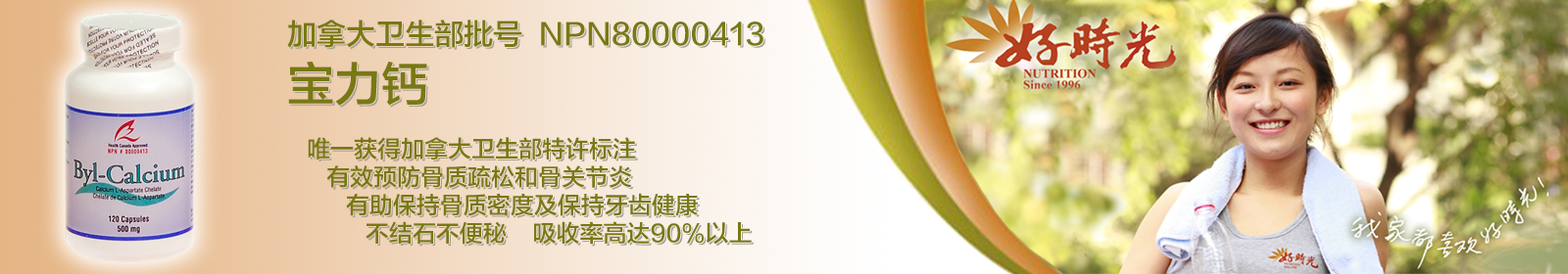
<style>
.page{position:relative;width:1568px;height:274px}
.page>*{position:absolute;margin:0}
.t1{font:23.5px "FZLTZHK--GBK1-0";color:#787913}
.t2{font:29.4px "FZLTZHK--GBK1-0";color:#787913}
.t3{font:47px "FZLTZHK--GBK1-0";color:#787913}
</style>
<div class="page">
<p class="t1" style="left:287px;top:20px;width:476px;height:225px"><span class="t2">加拿大卫生部批号  NPN80000413         <br></span><span class="t3">宝力钙<br></span><br>   唯一获得加拿大卫生部特许标注<br>      有效预防骨质疏松和骨关节炎<br>         有助保持骨质密度及保持牙齿健康<br>            不结石不便秘    吸收率高达90%以上</p>
</div>
